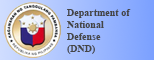
<style>
.page{position:relative;width:154px;height:60px}
.page>*{position:absolute;margin:0}
.t1{font:10px "TimesNewRomanPS-BoldMT";color:#454545}
</style>
<div class="page">
<p class="t1" style="left:67px;top:9px;width:64px;height:45px;text-align:right">Department of<br>National<br>Defense<br>(DND)</p>
</div>
